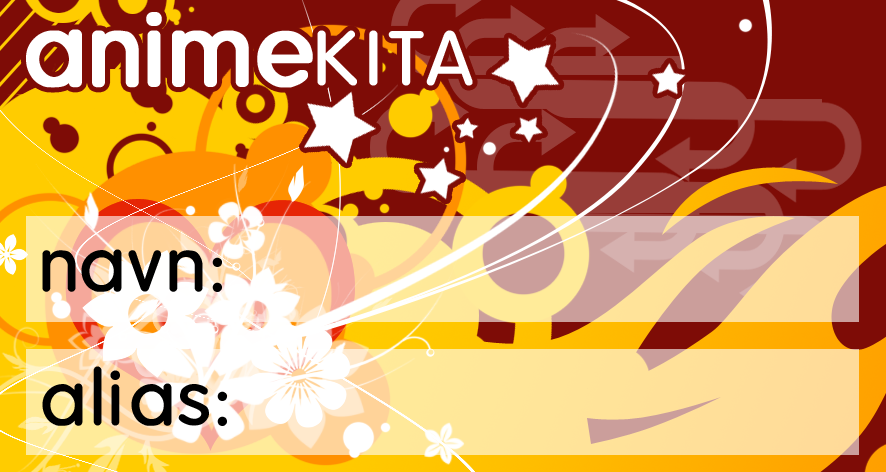
<style>
.page{position:relative;width:886px;height:472px;background:#7e0c06}
.page>*{position:absolute;margin:0}
.t1{font:75px "HowiesFunhouse";letter-spacing:-0.06em;color:#000000}
.t2{font:75px "HowiesFunhouse";letter-spacing:-0.12em;color:#000000}
</style>
<div class="page">
<p class="t1" style="left:42px;top:249px;width:180px;height:43px"><span class="t2">na </span>vn:</p>
<p class="t1" style="left:42px;top:366px;width:185px;height:60px">alias:</p>
</div>
